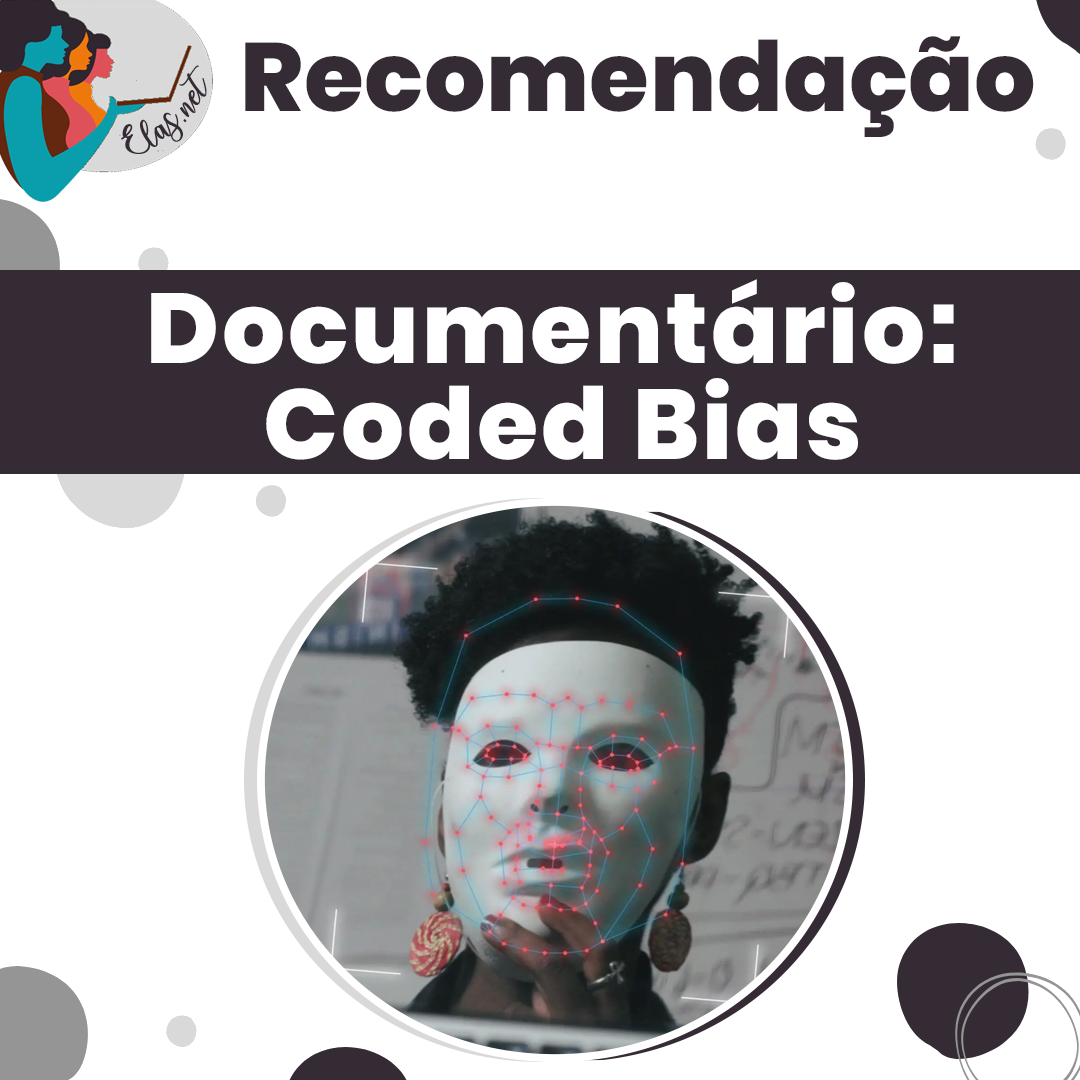
<style>
.page{position:relative;width:1080px;height:1080px;background:#ffffff}
.page>*{position:absolute;margin:0}
.t1{font:96.7px "Poppins-ExtraBold";letter-spacing:0.005em;color:#2f262f}
.t2{font:25px "charlinda-Regular";color:#342b34;scale:1.18 1}
.t3{font:99px/96.3px "Poppins-ExtraBold";letter-spacing:0.03em;color:#ffffff}
</style>
<div class="page">
<p class="t1" style="left:245px;top:36px;width:789px;height:101px">Recomendação</p>
<p class="t2" style="left:121px;top:65px;width:86px;height:89px;rotate:-43deg">Elas.net</p>
<p class="t3" style="left:151px;top:279px;width:803px;height:181px;text-align:center">Documentário: <br>Coded Bias</p>
</div>
